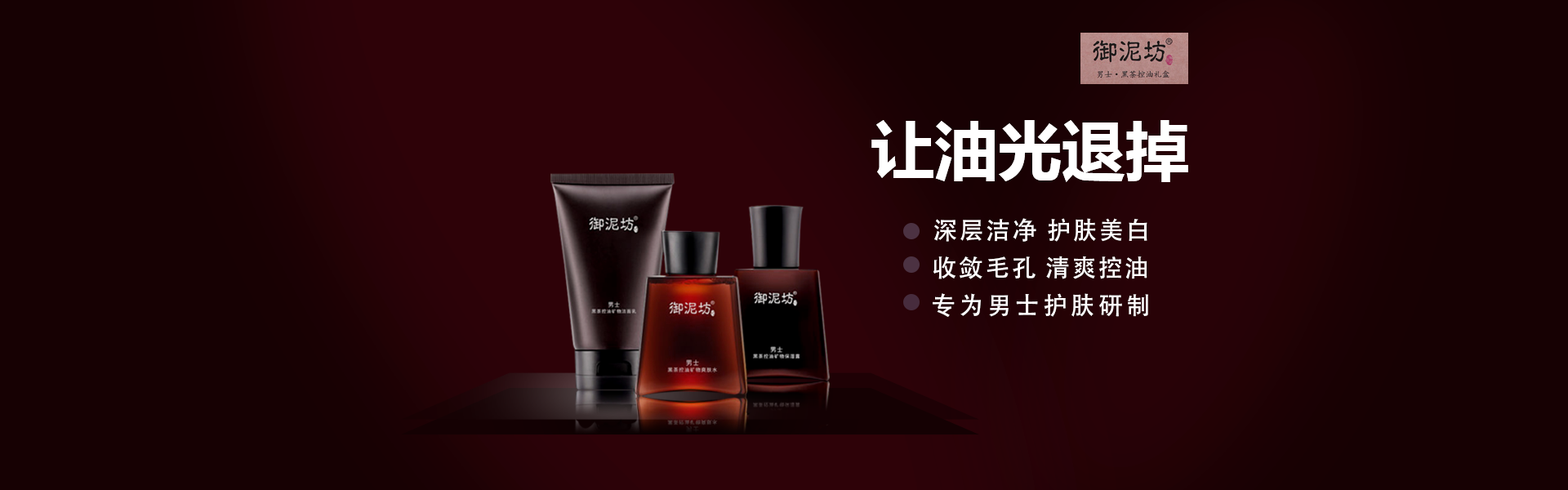
<style>
.page{position:relative;width:1568px;height:490px;background:#170103}
.page>*{position:absolute;margin:0}
.t1{font:63.6px "MicrosoftYaHei-Bold";color:#ffffff}
.t2{font:24.5px "AdobeHeitiStd-Regular";letter-spacing:0.08em;color:#ffffff}
.t3{font:24.5px "AdobeHeitiStd-Regular";letter-spacing:0.14em;color:#ffffff}
</style>
<div class="page">
<p class="t1" style="left:871px;top:120px;width:317px;height:62px">让油光退掉</p>
<p class="t2" style="left:934px;top:218px;width:213px;height:24px">深层洁净 护肤美白</p>
<p class="t2" style="left:933px;top:256px;width:214px;height:23px">收敛毛孔 清爽控油</p>
<p class="t3" style="left:933px;top:293px;width:215px;height:24px">专为男士护肤研制</p>
</div>
